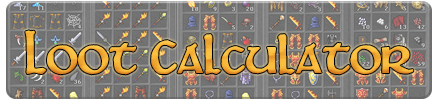
<style>
.page{position:relative;width:437px;height:100px}
.page>*{position:absolute;margin:0}
.t1{font:56.2px "Martel";color:#f8b839}
</style>
<div class="page">
<p class="t1" style="left:25px;top:30px;width:389px;height:45px">Loot Calculator</p>
</div>
